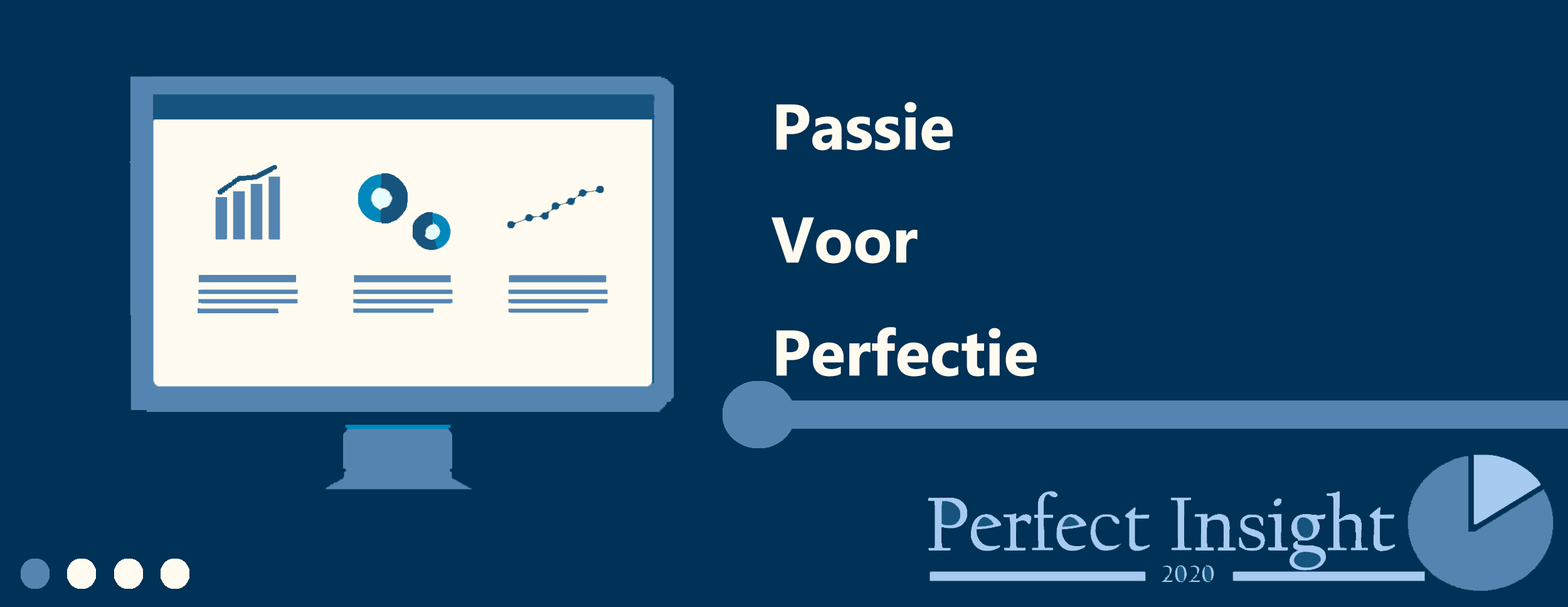
<style>
.page{position:relative;width:1568px;height:607px;background:#003156}
.page>*{position:absolute;margin:0}
.t1{font:64px/112.9px "MicrosoftPhagsPa-Bold";color:#fffbf0}
</style>
<div class="page">
<p class="t1" style="left:771px;top:102px;width:266px;height:274px">Passie<br>Voor<br>Perfectie</p>
</div>
